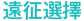
<style>
.page{position:relative;width:84px;height:21px;background:#ffffff}
.page>*{position:absolute;margin:0}
.t1{font:20px "GothicMB101Pr6N-Medium";color:#1dbdbf}
</style>
<div class="page">
<p class="t1" style="left:3px;top:0px;width:79px;height:20px">遠征選擇</p>
</div>
